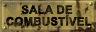
<style>
.page{position:relative;width:96px;height:32px}
.page>*{position:absolute;margin:0}
.t1{font:11.3px/11.7px "Arial-BoldMT";text-transform:uppercase;font-weight:bold}
</style>
<div class="page">
<p class="t1" style="left:6px;top:5px;width:86px;height:21px;text-align:center">SALA DE <br>COMBUSTÍVEL</p>
</div>
